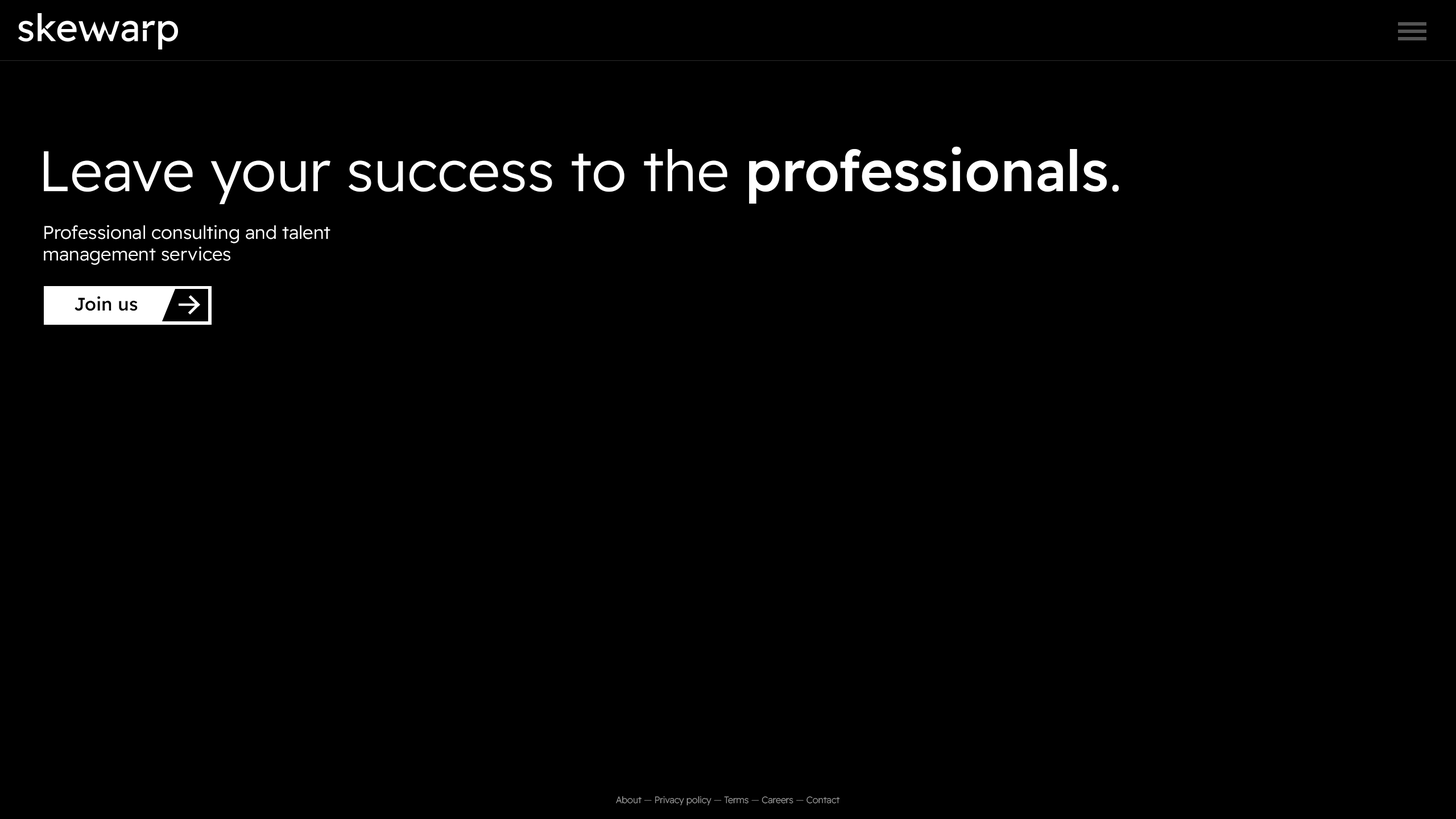
<style>
.page{position:relative;width:1456px;height:819px;background:#000000}
.page>*{position:absolute;margin:0}
.t1{font:56.9px "ReadexPro-Light";color:#ffffff}
.t2{font:56.9px "ReadexPro-Medium";color:#ffffff}
.t3{font:18.2px "ReadexPro-Light";color:#ffffff}
.t4{font:18.2px "ReadexPro-Medium";color:#000000}
.t5{font:9.1px "ReadexPro-ExtraLight";color:#9d9d9d}
.t6{font:9.1px "ReadexPro-ExtraLight";color:#717171}
.t7{font:9.1px "ReadexPro-ExtraLight";color:#727272}
</style>
<div class="page">
<p class="t1" style="left:44px;top:146px;width:1075px;height:58px">Leave your success to the <span class="t2">professionals</span>.</p>
<p class="t3" style="left:44px;top:225px;width:286px;height:40px">Professional consulting and talent<br>management services</p>
<p class="t4" style="left:75px;top:296px;width:63px;height:15px">Join us</p>
<p class="t5" style="left:616px;top:796px;width:224px;height:9px">About <span class="t6">— </span>Privacy policy <span class="t7">— </span>Terms <span class="t7">— </span>Careers <span class="t7">— </span>Contact</p>
</div>
